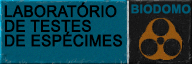
<style>
.page{position:relative;width:192px;height:64px}
.page>*{position:absolute;margin:0}
.t1{font:16px/14.7px "ArialMT";color:#000000;text-transform:uppercase;font-weight:bold;scale:0.95 1}
.t2{font:12px "Arial-BoldMT";letter-spacing:0.02em;color:#005a73;text-transform:uppercase}
</style>
<div class="page">
<p class="t1" style="left:4px;top:2px;width:119px;height:45px">Laboratório<br>de testes<br>de espécimes</p>
<p class="t2" style="left:131px;top:4px;width:60px;height:10px">BIODOMO</p>
</div>
